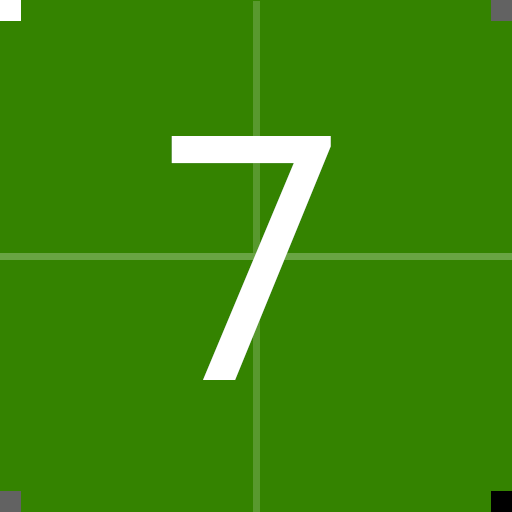
<style>
.page{position:relative;width:512px;height:512px;background:#348300}
.page>*{position:absolute;margin:0}
.t1{font:323.1px "MicrosoftYaHei";color:#ffffff}
</style>
<div class="page">
<p class="t1" style="left:171px;top:136px;width:160px;height:244px">7</p>
</div>
